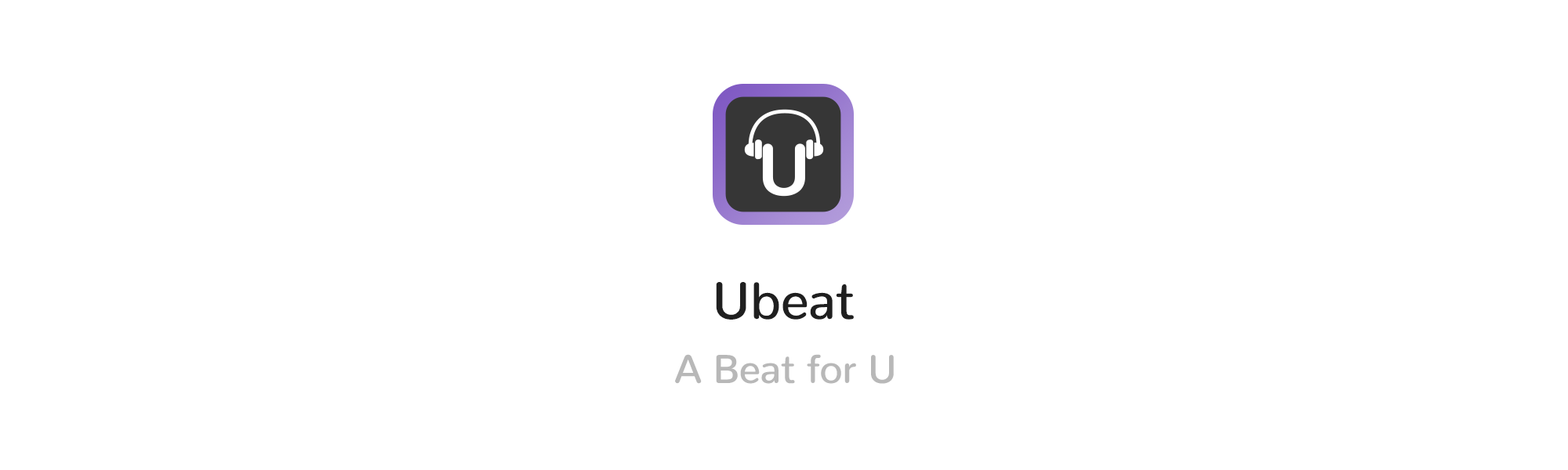
<style>
.page{position:relative;width:1568px;height:470px;background:#ffffff}
.page>*{position:absolute;margin:0}
.t1{font:52.5px "Nunito-Medium";letter-spacing:-0.005em;color:#1f1f1f}
.t2{font:40px "Nunito-Medium";letter-spacing:-0.005em;color:#b8b8b8}
</style>
<div class="page">
<p class="t1" style="left:716px;top:282px;width:138px;height:38px">Ubeat</p>
<p class="t2" style="left:675px;top:354px;width:219px;height:30px">A Beat for U</p>
</div>
